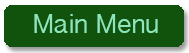
<style>
.page{position:relative;width:189px;height:53px;background:#11530c}
.page>*{position:absolute;margin:0}
.t1{font:24px "BanglaSangamMN";color:#8ce6ba}
</style>
<div class="page">
<p class="t1" style="left:34px;top:14px;width:124px;height:19px">Main Menu</p>
</div>
